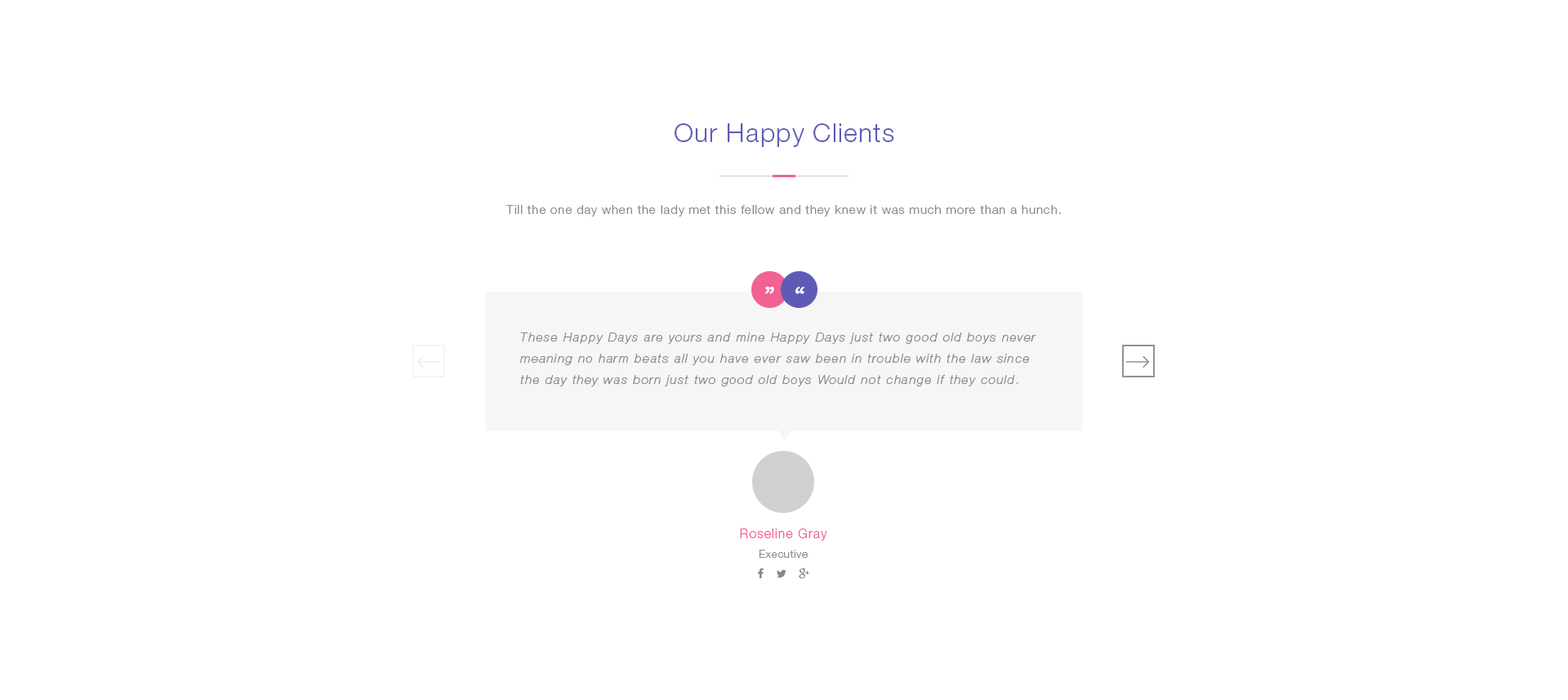
<style>
.page{position:relative;width:1568px;height:700px;background:#ffffff}
.page>*{position:absolute;margin:0}
.t1{font:26.1px "HelveticaNeueLTStd-Lt";letter-spacing:0.035em;color:#5e5bb6}
.t2{font:12.2px "HelveticaNeueLTStd-Lt";letter-spacing:0.06em;color:#888888}
.t3{font:24.5px "Georgia";letter-spacing:0.06em;color:#ffffff;font-weight:bold}
.t4{font:12.3px/21.2px "HelveticaNeue-UltraLightItal";letter-spacing:0.1em;color:#888888;font-weight:bold}
</style>
<div class="page">
<p class="t1" style="left:675px;top:123px;width:219px;height:24px">Our Happy Clients</p>
<p class="t2" style="left:506px;top:205px;width:555px;height:11px">Till the one day when the lady met this fellow and they knew it was much more than a hunch.</p>
<p class="t3" style="left:765px;top:287px;width:9px;height:7px;rotate:180deg">“</p>
<p class="t3" style="left:795px;top:287px;width:9px;height:7px">“</p>
<p class="t4" style="left:519px;top:332px;width:517px;height:55px">These Happy Days are yours and mine Happy Days just two good old boys never <br>meaning no harm beats all you have ever saw been in trouble with the law since the day they was born just two good old boys Would not change if they could.</p>
</div>
